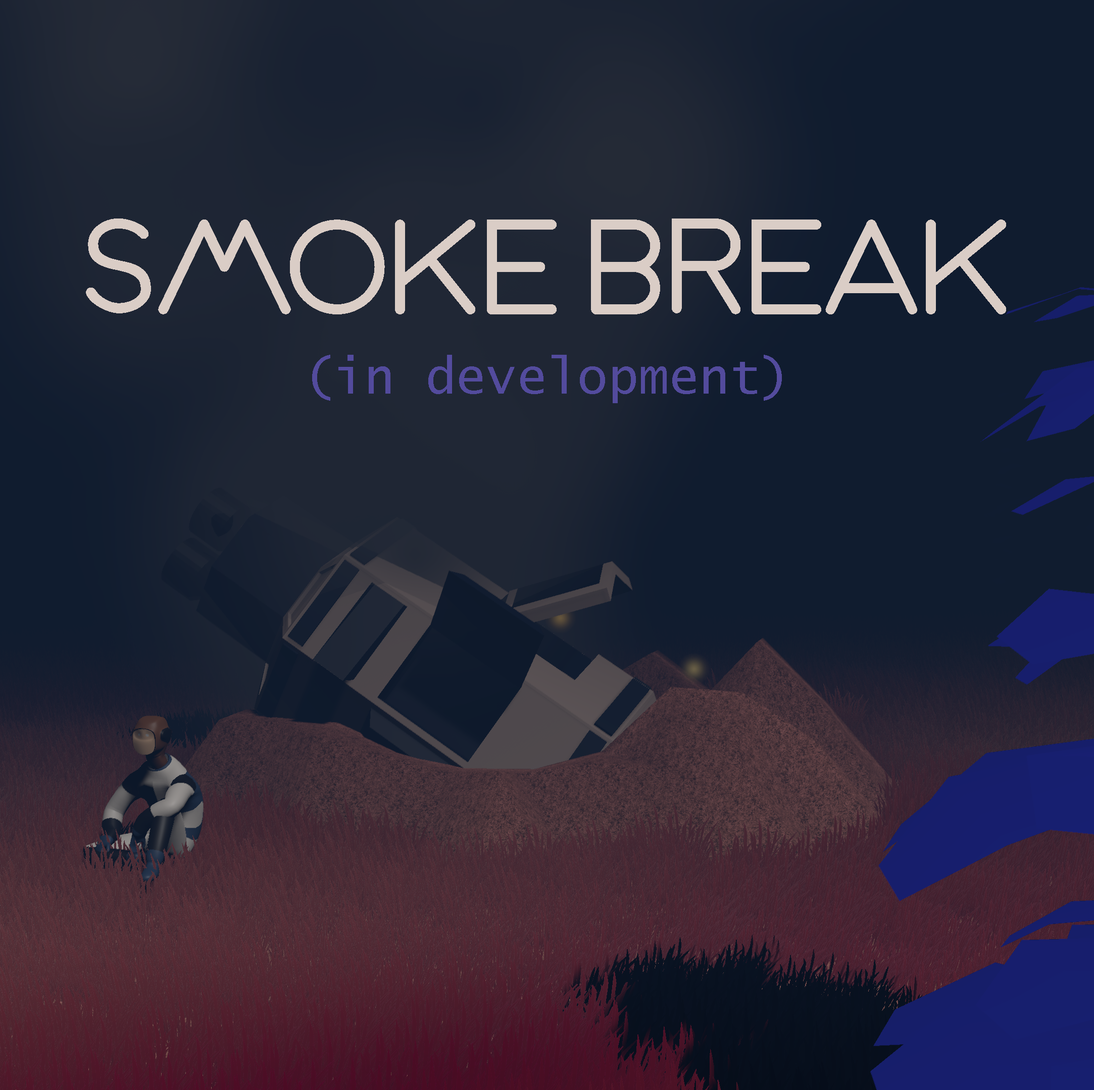
<style>
.page{position:relative;width:1094px;height:1090px}
.page>*{position:absolute;margin:0}
.t1{font:138.8px "Amazonas";color:#dacdc6}
.t2{font:50.5px "LucidaConsole";color:#534b9d}
</style>
<div class="page">
<p class="t1" style="left:86px;top:219px;width:920px;height:96px">SMOKE BREAK</p>
<p class="t2" style="left:312px;top:355px;width:470px;height:48px">(in development)</p>
</div>
